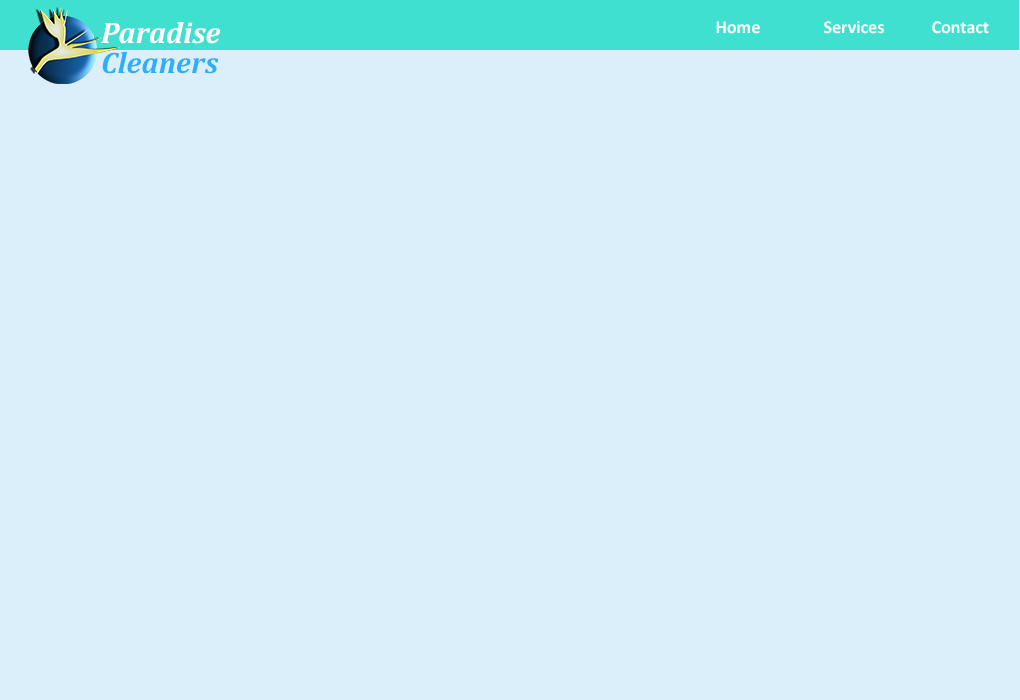
<style>
.page{position:relative;width:1020px;height:700px;background:#dbeffa}
.page>*{position:absolute;margin:0}
.t1{font:30px/30px "Cambria-BoldItalic";color:#ffffff}
.t2{font:30px/30px "Cambria-BoldItalic";color:#2eaef7}
.t3{font:18px "Calibri-Bold";color:#f8fbfc}
</style>
<div class="page">
<p class="t1" style="left:101px;top:22px;width:119px;height:52px">Paradise <br><span class="t2">Cleaners</span></p>
<p class="t3" style="left:716px;top:21px;width:273px;height:13px">Home  Services  Contact</p>
</div>
